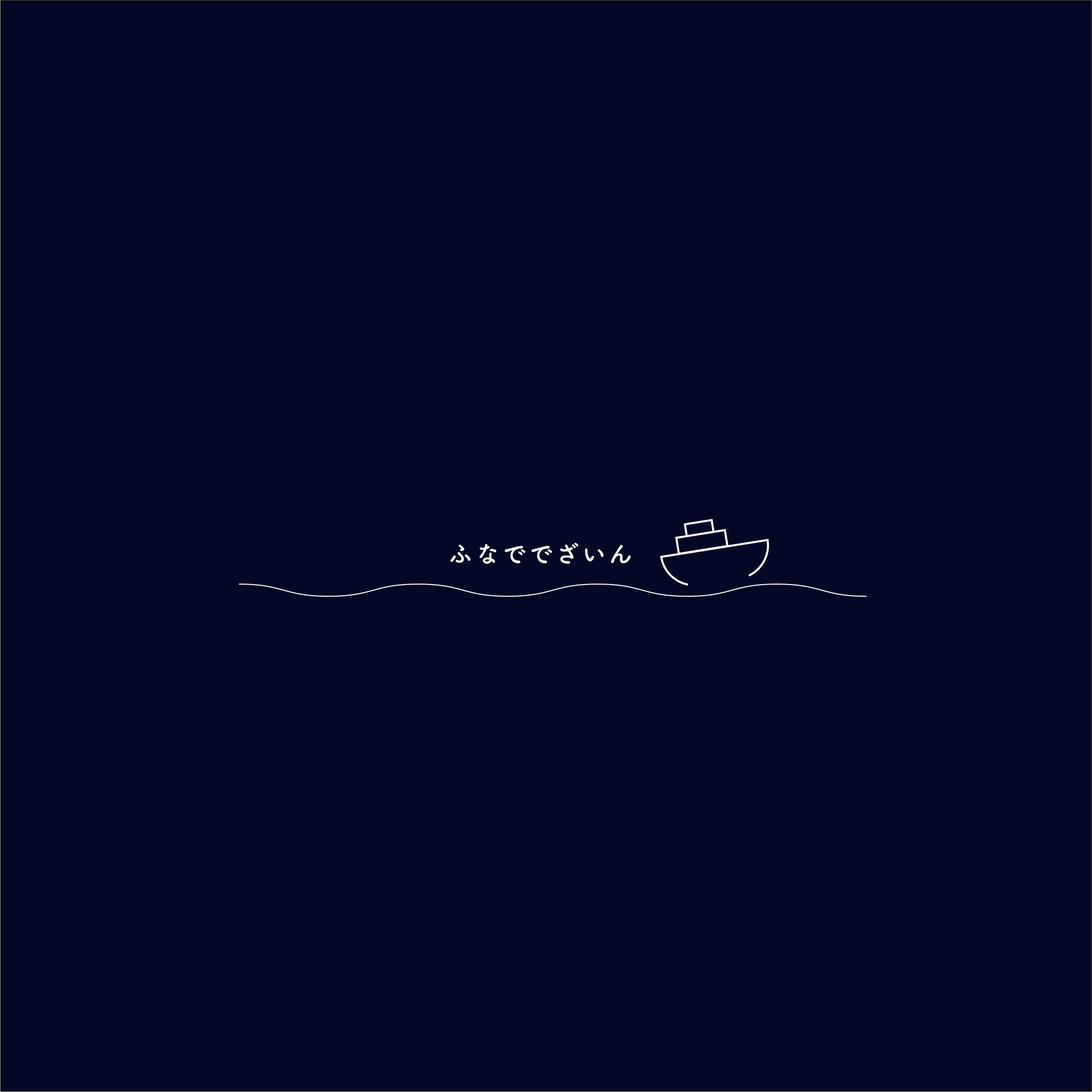
<style>
.page{position:relative;width:1092px;height:1092px;background:#040826}
.page>*{position:absolute;margin:0}
.t1{font:24.3px "TsukuARdGothicStd-B";letter-spacing:0.1em;color:#ffffff}
</style>
<div class="page">
<p class="t1" style="left:450px;top:543px;width:181px;height:21px">ふなででざいん</p>
</div>
